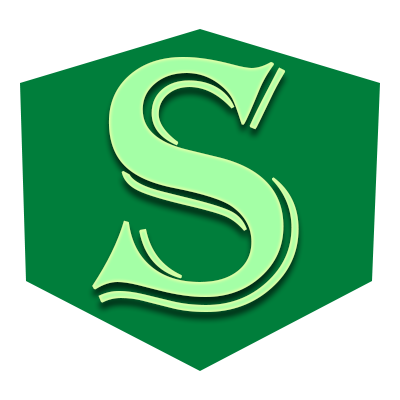
<style>
.page{position:relative;width:400px;height:400px;background:#ffffff}
.page>*{position:absolute;margin:0}
.t1{font:368.1px "Algerian";color:#a4ffa6;font-weight:bold}
</style>
<div class="page">
<p class="t1" style="left:92px;top:57px;width:207px;height:255px">S</p>
</div>
